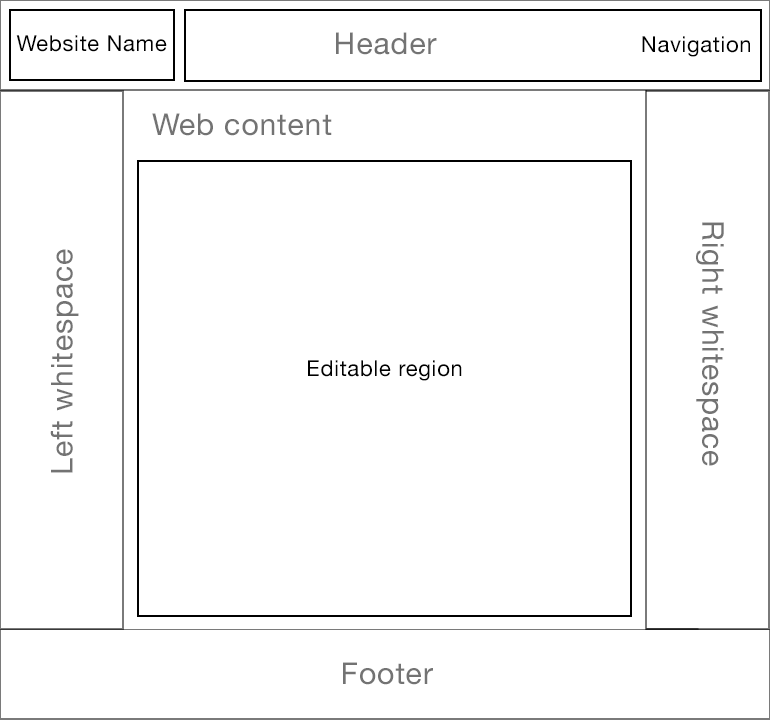
<style>
.page{position:relative;width:770px;height:720px;background:#ffffff}
.page>*{position:absolute;margin:0}
.t1{font:22px "HelveticaNeue";letter-spacing:0.03em;color:#000000}
.t2{font:30.2px "HelveticaNeue";letter-spacing:0.03em;color:#737373}
</style>
<div class="page">
<p class="t1" style="left:16px;top:35px;width:151px;height:17px">Website Name</p>
<p class="t2" style="left:336px;top:32px;width:101px;height:23px">Header</p>
<p class="t1" style="left:642px;top:36px;width:108px;height:21px">Navigation</p>
<p class="t2" style="left:152px;top:113px;width:180px;height:23px">Web content</p>
<p class="t2" style="left:696px;top:222px;width:28px;height:244px;rotate:90deg">Right whitespace</p>
<p class="t2" style="left:50px;top:249px;width:29px;height:224px;rotate:-90deg">Left whitespace</p>
<p class="t1" style="left:308px;top:360px;width:154px;height:21px">Editable region</p>
<p class="t2" style="left:343px;top:662px;width:90px;height:23px">Footer</p>
</div>
